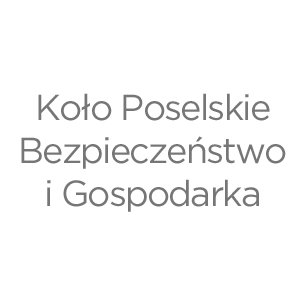
<style>
.page{position:relative;width:300px;height:300px;background:#ffffff}
.page>*{position:absolute;margin:0}
.t1{font:36px "Gotham-Book";letter-spacing:-0.05em;color:#767676}
</style>
<div class="page">
<p class="t1" style="left:21px;top:93px;width:265px;height:119px;text-align:center">Koło Poselskie<br>Bezpieczeństwo<br>i Gospodarka</p>
</div>
